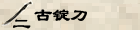
<style>
.page{position:relative;width:140px;height:30px}
.page>*{position:absolute;margin:0}
.t1{font:18px "LiSu";letter-spacing:-0.025em;color:#000000;font-weight:bold}
</style>
<div class="page">
<p class="t1" style="left:34px;top:9px;width:53px;height:12px">古锭刀</p>
<p class="t1" style="left:13px;top:19px;width:18px;height:10px">二</p>
</div>
